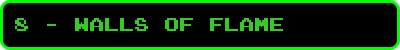
<style>
.page{position:relative;width:400px;height:50px;background:#000000}
.page>*{position:absolute;margin:0}
.t1{font:18px "JoystixMonospace-Regular";color:#34cb24}
</style>
<div class="page">
<p class="t1" style="left:15px;top:18px;width:268px;height:13px">8 - WALLS OF FLAME</p>
</div>
